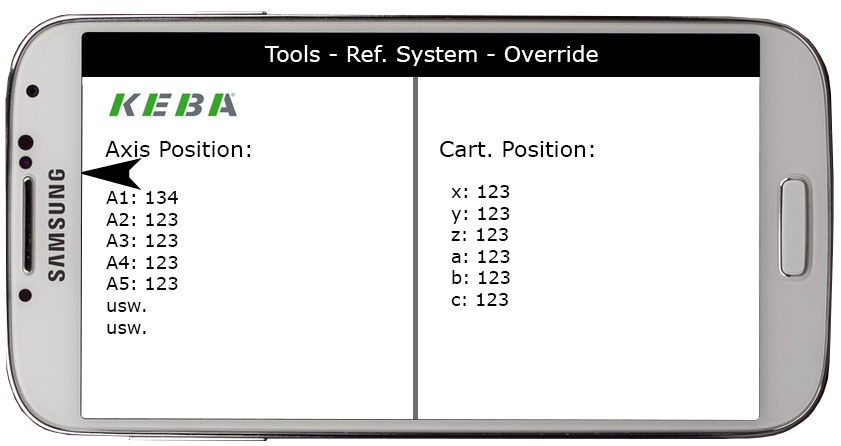
<style>
.page{position:relative;width:841px;height:446px;background:#ffffff}
.page>*{position:absolute;margin:0}
.t1{font:22px "Verdana";color:#ffffff}
.t2{font:22px "Verdana";color:#000000}
.t3{font:18px "Verdana";color:#000000}
</style>
<div class="page">
<p class="t1" style="left:264px;top:45px;width:334px;height:21px">Tools - Ref. System - Override</p>
<p class="t2" style="left:105px;top:141px;width:146px;height:16px">Axis Position:</p>
<p class="t2" style="left:440px;top:141px;width:154px;height:16px">Cart. Position:</p>
<p class="t3" style="left:451px;top:185px;width:59px;height:121px">x: 123<br>y: 123<br>z: 123<br>a: 123<br>b: 123<br>c: 123</p>
<p class="t3" style="left:106px;top:191px;width:72px;height:143px">A1: 134<br>A2: 123<br>A3: 123<br>A4: 123<br>A5: 123<br>usw.<br>usw.</p>
</div>
